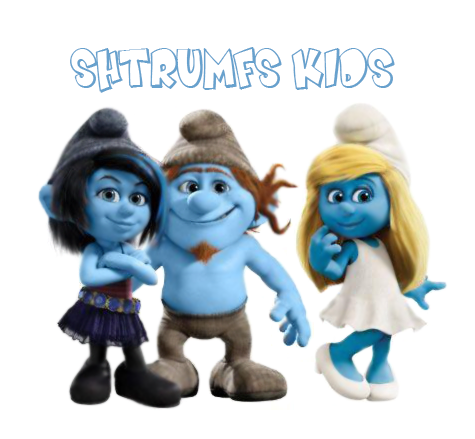
<style>
.page{position:relative;width:475px;height:439px;background:#ffffff}
.page>*{position:absolute;margin:0}
.t1{font:55px "SmartieCAPS";color:#67a1cd}
</style>
<div class="page">
<p class="t1" style="left:70px;top:47px;width:325px;height:46px">SHTRUMFS KIDS</p>
</div>
